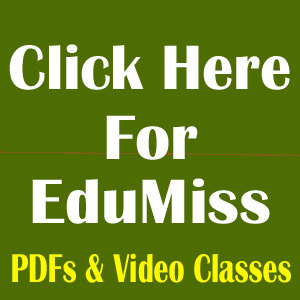
<style>
.page{position:relative;width:300px;height:300px;background:#4d6c02}
.page>*{position:absolute;margin:0}
.t1{font:65px "BritannicBold";color:#ffffff;scale:0.96 1}
.t2{font:65px "BritannicBold";color:#ffffff}
.t3{font:41.6px "BritannicBold";color:#fbf806;scale:0.72 1}
</style>
<div class="page">
<p class="t1" style="left:9px;top:44px;width:281px;height:46px">Click Here</p>
<p class="t2" style="left:106px;top:115px;width:92px;height:45px">For</p>
<p class="t2" style="left:32px;top:178px;width:238px;height:46px">EduMiss</p>
<p class="t3" style="left:12px;top:253px;width:279px;height:30px">PDFs &amp; Video Classes</p>
</div>
